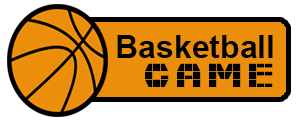
<style>
.page{position:relative;width:300px;height:120px;background:#ea8e0b}
.page>*{position:absolute;margin:0}
.t1{font:32px "Arial-BoldMT";color:#000000}
.t2{font:32px "Fast-Money";color:#000000}
</style>
<div class="page">
<p class="t1" style="left:117px;top:35px;width:156px;height:23px">Basketball</p>
<p class="t2" style="left:145px;top:63px;width:128px;height:24px">GAME</p>
</div>
